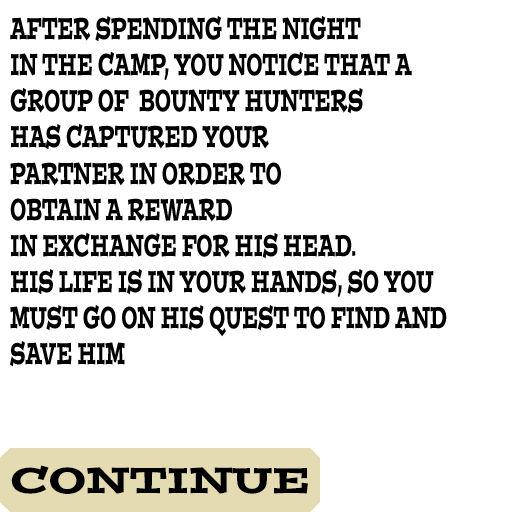
<style>
.page{position:relative;width:512px;height:512px;background:#ffffff}
.page>*{position:absolute;margin:0}
.t1{font:30.1px "PostinoStd";color:#000000;scale:0.54 1}
.t2{font:36px "PostinoStd";color:#000000;scale:1.06 1}
</style>
<div class="page">
<p class="t1" style="left:10px;top:16px;width:437px;height:351px">AFTER SPENDING THE NIGHT <br>IN THE CAMP, YOU NOTICE THAT A <br>GROUP OF  BOUNTY HUNTERS <br>HAS CAPTURED YOUR<br>PARTNER IN ORDER TO<br>OBTAIN A REWARD <br>IN EXCHANGE FOR HIS HEAD.<br>HIS LIFE IS IN YOUR HANDS, SO YOU<br>MUST GO ON HIS QUEST TO FIND AND <br>SAVE HIM</p>
<p class="t2" style="left:11px;top:465px;width:297px;height:29px">CONTINUE</p>
</div>
